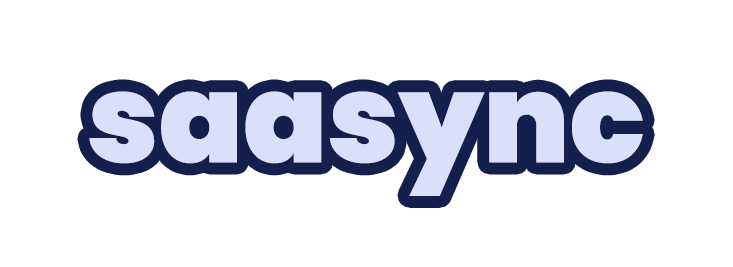
<style>
.page{position:relative;width:733px;height:267px;background:#ffffff}
.page>*{position:absolute;margin:0}
.t1{font:124px "Poppins-Black";color:#d9e0fa}
</style>
<div class="page">
<p class="t1" style="left:89px;top:91px;width:554px;height:105px">saasync</p>
<p class="t1" style="left:89px;top:91px;width:554px;height:105px">saasync</p>
</div>
